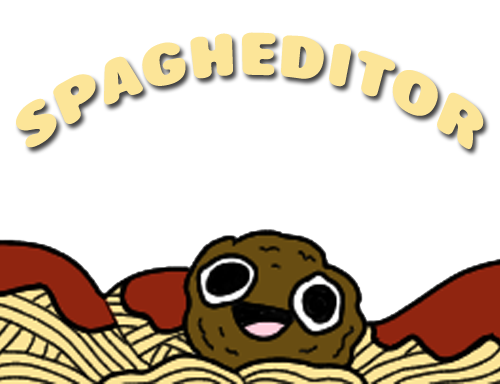
<style>
.page{position:relative;width:500px;height:384px;background:#ffffff}
.page>*{position:absolute;margin:0}
.t1{font:54.2px "THAlphabetSoup";letter-spacing:0.01em;color:#fce598;scale:0.83 1}
</style>
<div class="page">
<p class="t1" style="left:16px;top:32px;width:468px;height:117px;text-align:center">SpaghEditor</p>
</div>
